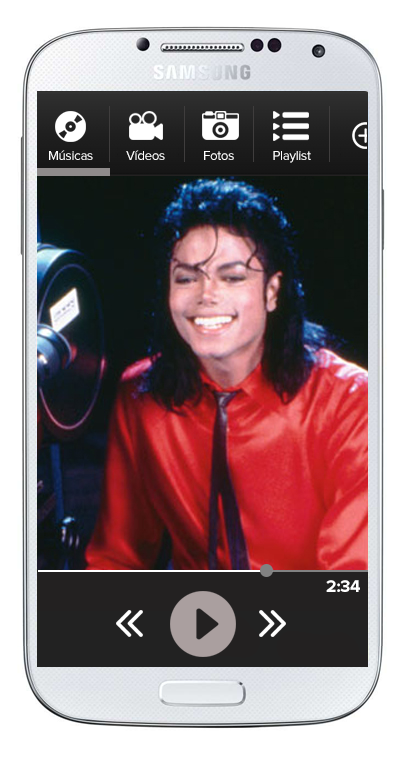
<style>
.page{position:relative;width:407px;height:770px;background:#ffffff}
.page>*{position:absolute;margin:0}
.t1{font:13.4px "ProximaNova-Regular";letter-spacing:-0.025em;color:#ffffff}
.t2{font:17.2px "ProximaNova-Bold";letter-spacing:-0.025em;color:#ffffff}
</style>
<div class="page">
<p class="t1" style="left:49px;top:150px;width:44px;height:10px">Músicas</p>
<p class="t1" style="left:126px;top:150px;width:39px;height:10px">Vídeos</p>
<p class="t1" style="left:204px;top:151px;width:30px;height:9px">Fotos</p>
<p class="t1" style="left:273px;top:151px;width:38px;height:12px">Playlist</p>
<p class="t2" style="left:326px;top:580px;width:34px;height:12px">2:34</p>
</div>
